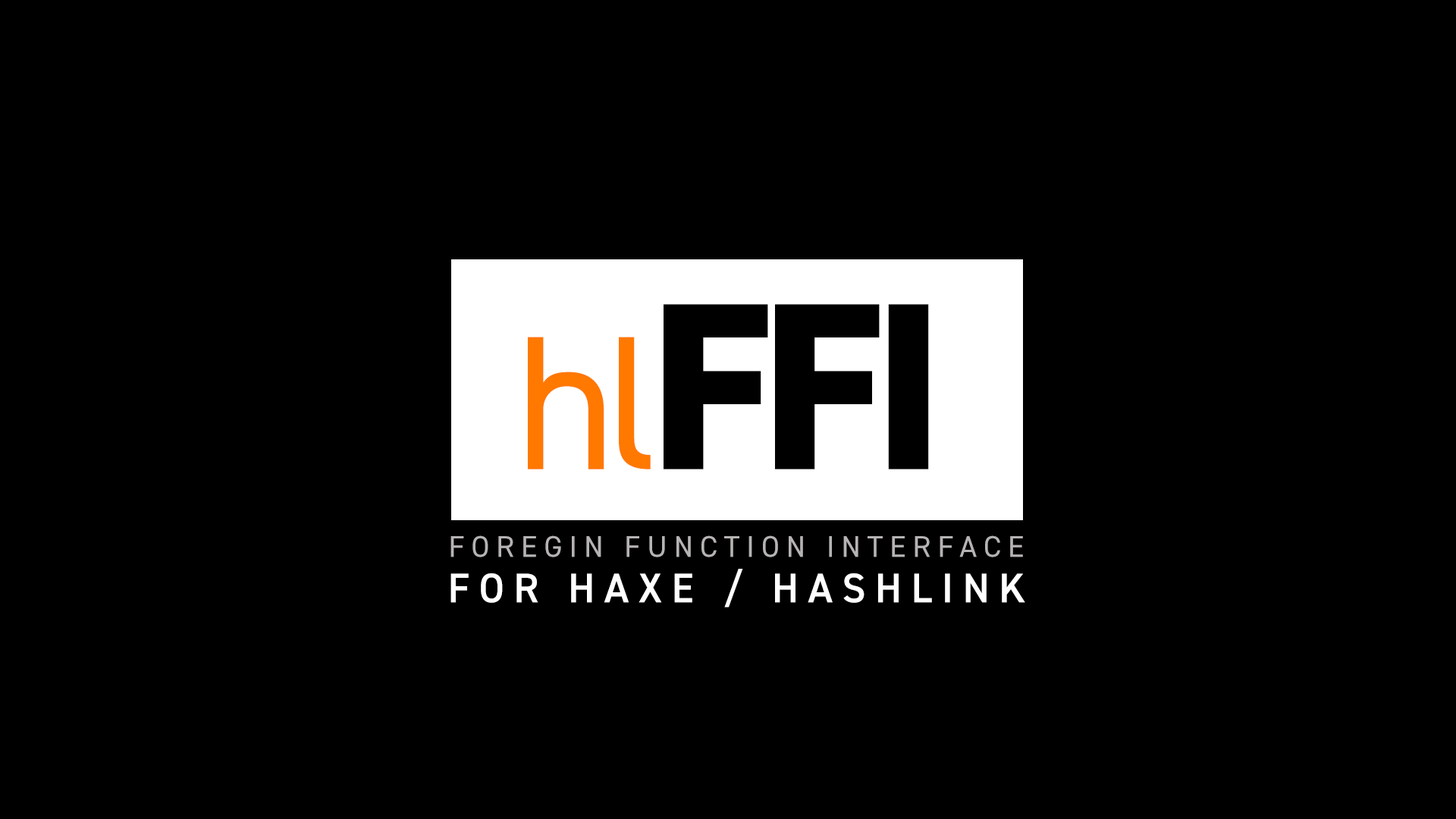
<style>
.page{position:relative;width:1456px;height:819px;background:#000000}
.page>*{position:absolute;margin:0}
.t1{font:238.9px "DIN2014-ExtraBold";letter-spacing:-0.05em;color:#000000}
.t2{font:191.1px "DIN2014-Regular";letter-spacing:-0.05em;color:#ff7800}
.t3{font:29.9px "DIN2014-Regular";letter-spacing:0.228em;color:#b6b3b3}
.t4{font:41.4px "DIN2014-Demi";letter-spacing:0.226em;color:#ffffff}
</style>
<div class="page">
<p class="t1" style="left:528px;top:304px;width:401px;height:165px"><span class="t2">hl</span>FFI</p>
<p class="t3" style="left:450px;top:535px;width:573px;height:22px">FOREGIN FUNCTION INTERFACE</p>
<p class="t4" style="left:450px;top:569px;width:575px;height:38px">FOR HAXE / HASHLINK</p>
</div>
